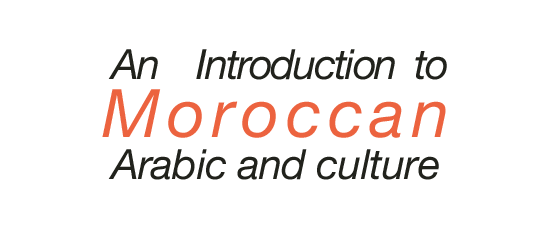
<style>
.page{position:relative;width:548px;height:228px;background:#ffffff}
.page>*{position:absolute;margin:0}
.t1{font:41.7px/58.3px "HelveticaNeue-Italic";letter-spacing:-0.05em;color:#21221c}
.t2{font:66.7px/58.3px "HelveticaNeue-Italic";letter-spacing:0.1em;color:#ec633f}
.t3{font:41.7px/41.7px "HelveticaNeue-Italic";letter-spacing:-0.015em;color:#21221c}
</style>
<div class="page">
<p class="t1" style="left:102px;top:49px;width:345px;height:131px;text-align:center">An    Introduction  to<br><span class="t2">Moroccan<br></span><span class="t3">Arabic and culture</span></p>
</div>
